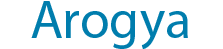
<style>
.page{position:relative;width:223px;height:49px;background:#ffffff}
.page>*{position:absolute;margin:0}
.t1{font:54.2px "MyriadPro-Regular";color:#007dad}
</style>
<div class="page">
<p class="t1" style="left:31px;top:1px;width:157px;height:49px">Arogya</p>
</div>
